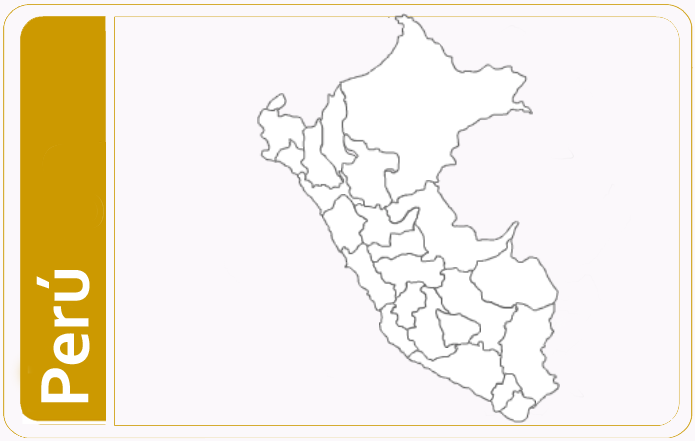
<style>
.page{position:relative;width:695px;height:441px;background:#fbf8fb}
.page>*{position:absolute;margin:0}
.t1{font:72px "Corbel-Bold";color:#ffffff}
</style>
<div class="page">
<p class="t1" style="left:36px;top:270px;width:54px;height:133px;rotate:-90deg">Perú</p>
</div>
